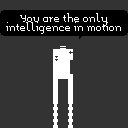
<style>
.page{position:relative;width:128px;height:128px;background:#333333}
.page>*{position:absolute;margin:0}
.t1{font:8px "Memoria";color:#ffffff}
</style>
<div class="page">
<p class="t1" style="left:6px;top:13px;width:115px;height:21px;text-align:center">You are the only<br>intelligence in motion</p>
</div>
